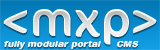
<style>
.page{position:relative;width:160px;height:50px}
.page>*{position:absolute;margin:0}
.t1{font:48px "Cocon-Regular";letter-spacing:0.025em}
.t2{font:9.1px "HelveticaRoundedLT-BlackObl";color:#fefefe}
.t3{font:9.1px "HelveticaRoundedLT-BlackObl";color:#ffffff}
.t4{font:9px "HelveticaROBoldItalic";color:#ffffff}
</style>
<div class="page">
<p class="t1" style="left:3px;top:9px;width:154px;height:36px">&lt;mxp&gt;</p>
<p class="t2" style="left:4px;top:41px;width:97px;height:8px">fully modular portal</p>
<p class="t3" style="left:116px;top:41px;width:23px;height:6px"><span class="t4"> </span>CMS</p>
</div>
